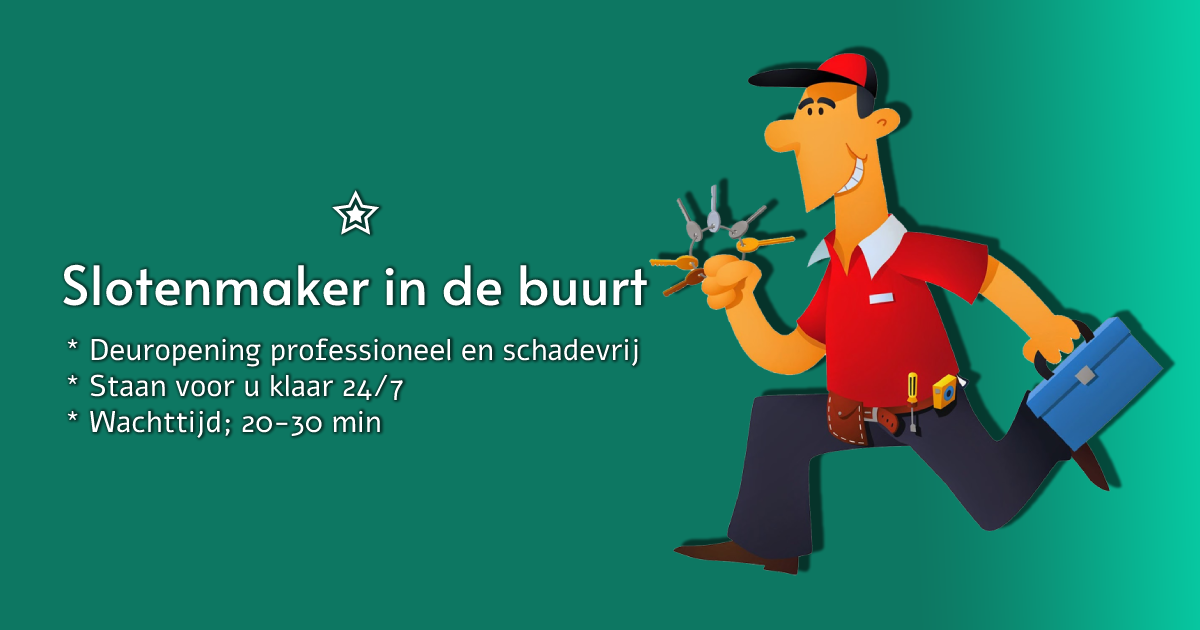
<style>
.page{position:relative;width:1200px;height:630px;background:#0d7762}
.page>*{position:absolute;margin:0}
.t1{font:54px "Alata-Regular";color:#ffffff}
.t2{font:30px "Alef-Regular";color:#ffffff}
</style>
<div class="page">
<p class="t1" style="left:63px;top:264px;width:584px;height:42px">Slotenmaker in de buurt</p>
<p class="t2" style="left:67px;top:338px;width:571px;height:101px">* Deuropening professioneel en schadevrij<br>* Staan voor u klaar 24/7<br>* Wachttijd; 20-30 min</p>
</div>
